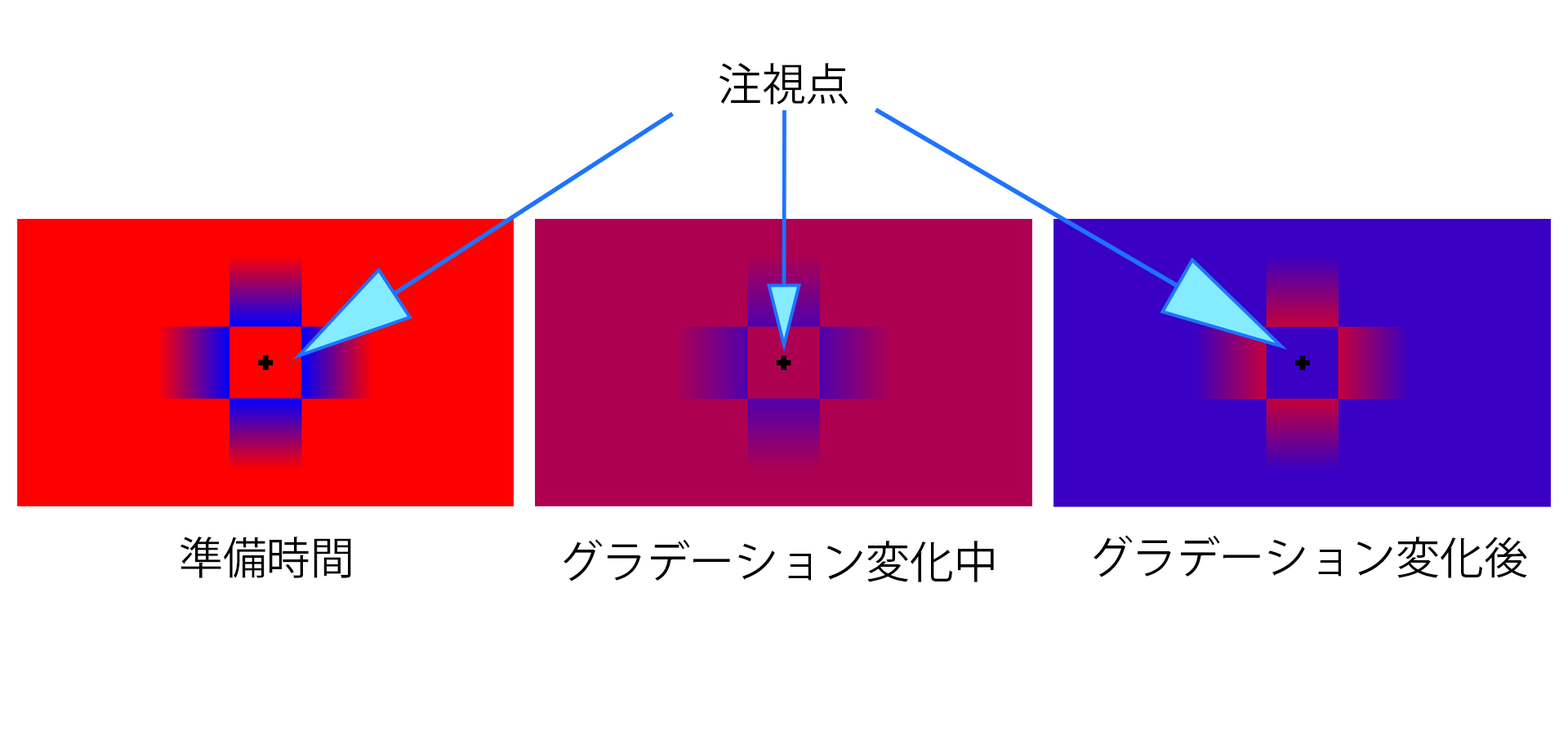
<style>
.page{position:relative;width:1568px;height:735px;background:#ffffff}
.page>*{position:absolute;margin:0}
.t1{font:44.2px "KozGoPr6N-Regular";color:#000000}
</style>
<div class="page">
<p class="t1" style="left:719px;top:63px;width:130px;height:42px">注視点</p>
<p class="t1" style="left:180px;top:537px;width:171px;height:41px">準備時間</p>
<p class="t1" style="left:564px;top:539px;width:430px;height:43px">グラデーション変化中</p>
<p class="t1" style="left:1094px;top:535px;width:433px;height:43px">グラデーション変化後</p>
</div>
